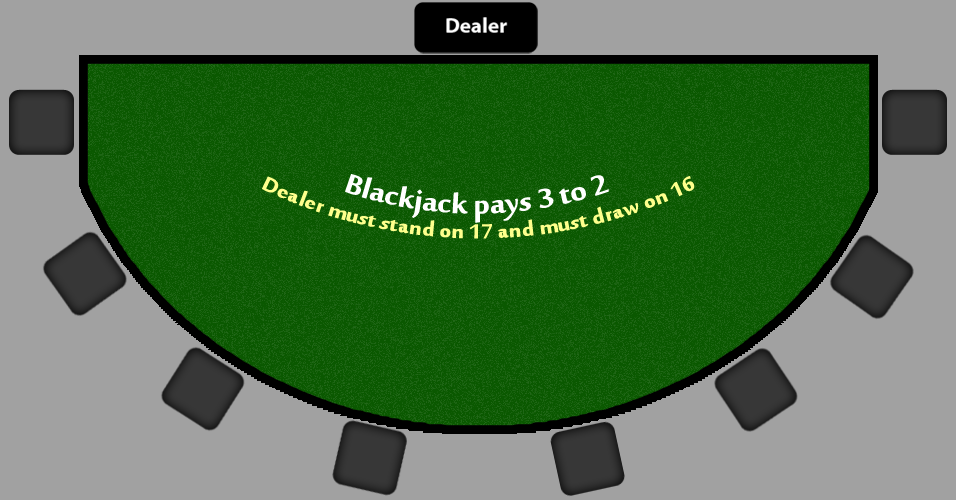
<style>
.page{position:relative;width:956px;height:500px;background:#a1a1a1}
.page>*{position:absolute;margin:0}
.t1{font:41.7px "MoolBoran";color:#ffffff}
.t2{font:31.2px "MoolBoran";color:#feff8c}
</style>
<div class="page">
<p class="t1" style="left:345px;top:174px;width:264px;height:49px">Blackjack pays 3 to 2</p>
<p class="t2" style="left:262px;top:176px;width:433px;height:63px;text-align:center">Dealer must stand on 17 and must draw on 16</p>
</div>
